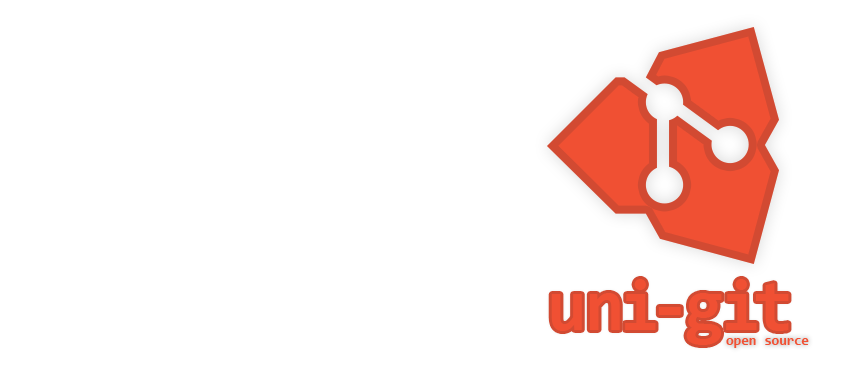
<style>
.page{position:relative;width:860px;height:389px;background:#ffffff}
.page>*{position:absolute;margin:0}
.t1{font:72px "Consolas-Bold";color:#f05033}
.t2{font:14px "Consolas-Bold";color:#f05033}
</style>
<div class="page">
<p class="t1" style="left:551px;top:279px;width:238px;height:66px">uni-git</p>
<p class="t2" style="left:726px;top:338px;width:83px;height:10px">open source</p>
</div>
